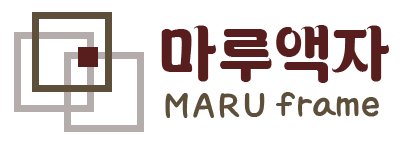
<style>
.page{position:relative;width:400px;height:150px;background:#ffffff}
.page>*{position:absolute;margin:0}
.t1{font:60px "YEONGJUPunggiGinseng-TTF";color:#581d1d}
</style>
<div class="page">
<p class="t1" style="left:161px;top:25px;width:228px;height:58px">마루액자</p>
</div>
